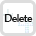
<style>
.page{position:relative;width:36px;height:36px;background:#ffffff}
.page>*{position:absolute;margin:0}
.t1{font:10.7px "AmiraParadiso";letter-spacing:-0.05em;color:#000000}
</style>
<div class="page">
<p class="t1" style="left:4px;top:14px;width:29px;height:8px;opacity:0.96">Delete</p>
</div>
